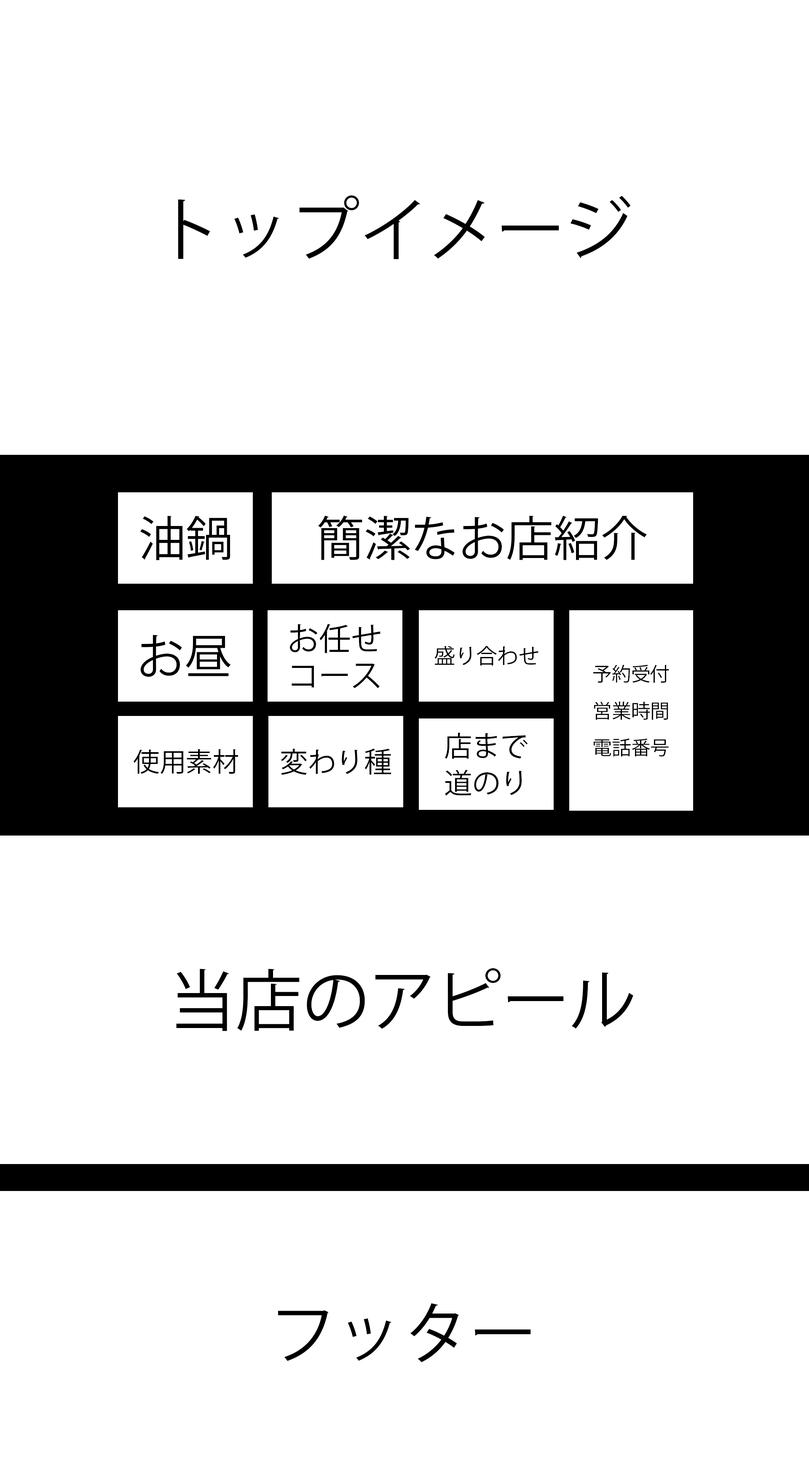
<style>
.page{position:relative;width:809px;height:1474px;background:#ffffff}
.page>*{position:absolute;margin:0}
.t1{font:68.5px "KozGoPr6N-Regular";color:#000000}
.t2{font:47.4px "KozGoPr6N-Regular";color:#000000}
.t3{font:31.6px/36.9px "KozGoPr6N-Regular";color:#000000}
.t4{font:21.1px "KozGoPr6N-Regular";color:#000000}
.t5{font:19.3px/36.9px "KozGoPr6N-Regular";color:#000000}
.t6{font:28.1px/36.9px "KozGoPr6N-Regular";color:#000000}
.t7{font:26.3px "KozGoPr6N-Regular";color:#000000}
.t8{font:28.1px "KozGoPr6N-Regular";color:#000000}
.t9{font:66.7px "KozGoPr6N-Regular";color:#000000}
</style>
<div class="page">
<p class="t1" style="left:178px;top:195px;width:453px;height:64px">トップイメージ</p>
<p class="t2" style="left:140px;top:516px;width:90px;height:44px">油鍋</p>
<p class="t2" style="left:318px;top:516px;width:329px;height:44px">簡潔なお店紹介</p>
<p class="t3" style="left:290px;top:624px;width:90px;height:64px">お任せ<br>コース</p>
<p class="t2" style="left:140px;top:635px;width:91px;height:42px">お昼</p>
<p class="t4" style="left:434px;top:646px;width:104px;height:20px">盛り合わせ</p>
<p class="t5" style="left:593px;top:665px;width:76px;height:92px">予約受付<br>営業時間<br>電話番号</p>
<p class="t6" style="left:445px;top:733px;width:83px;height:63px">店まで<br>道のり</p>
<p class="t7" style="left:134px;top:749px;width:104px;height:25px">使用素材</p>
<p class="t8" style="left:281px;top:749px;width:110px;height:26px">変わり種</p>
<p class="t9" style="left:176px;top:968px;width:457px;height:63px">当店のアピール</p>
<p class="t9" style="left:278px;top:1303px;width:253px;height:60px">フッター</p>
</div>
